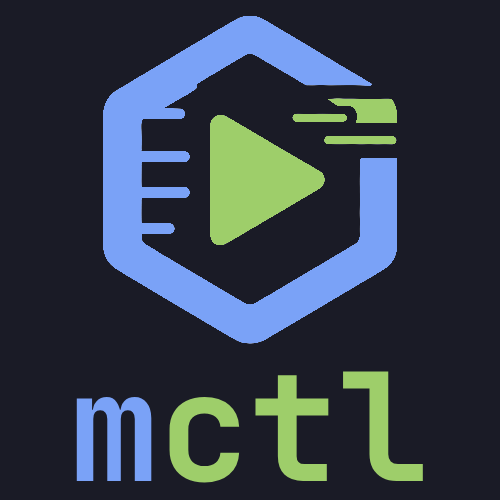
<style>
.page{position:relative;width:500px;height:500px;background:#1a1b26}
.page>*{position:absolute;margin:0}
.t1{font:150px "JetBrainsMonoRoman-Bold";color:#9ece6a}
.t2{font:150px "JetBrainsMonoRoman-Bold";color:#7aa2f7}
</style>
<div class="page">
<p class="t1" style="left:76px;top:371px;width:347px;height:112px"><span class="t2">m</span>ctl</p>
</div>
